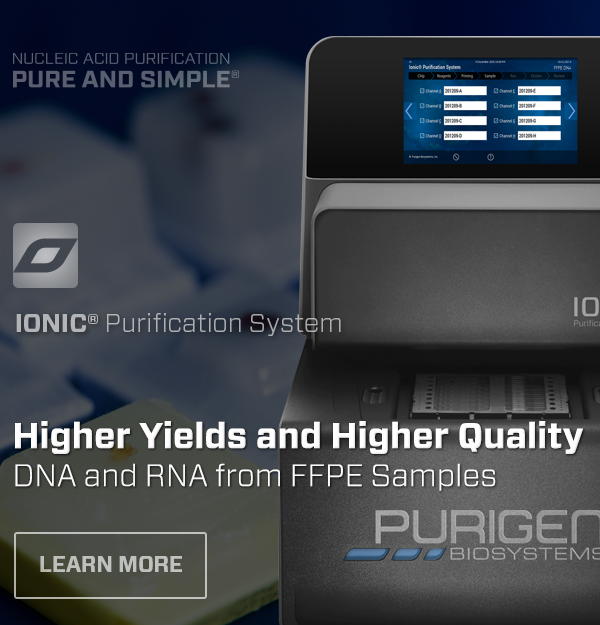
<style>
.page{position:relative;width:600px;height:625px}
.page>*{position:absolute;margin:0}
.t1{font:26px "Forza-Light";color:#b1b3b6}
.t2{font:26px "Forza-Bold";color:#b1b3b6;text-transform:uppercase}
.t3{font:35.6px/37.9px "Forza-Bold";color:#ffffff}
.t4{font:30.8px/37.9px "Forza-Light";color:#ffffff}
.t5{font:21.9px "Forza-Bold";letter-spacing:-0.01em;color:#bfc1bd;text-transform:uppercase}
</style>
<div class="page">
<p class="t1" style="left:16px;top:313px;width:325px;height:23px"><span class="t2">Ionic® </span>Purification System</p>
<p class="t3" style="left:15px;top:421px;width:569px;height:70px">Higher Yields and Higher Quality<br><span class="t4">DNA and RNA from FFPE Samples</span></p>
<p class="t5" style="left:40px;top:556px;width:142px;height:16px">Learn More</p>
</div>
